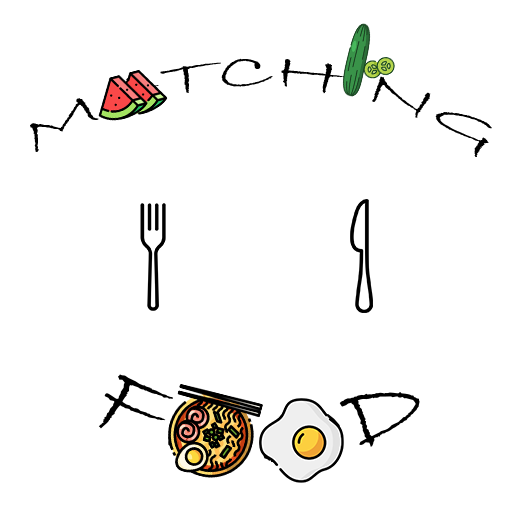
<style>
.page{position:relative;width:512px;height:512px;background:#ffffff}
.page>*{position:absolute;margin:0}
.t1{font:50px "BradleyHandITC";color:#000000}
.t2{font:100px "BradleyHandITC";color:#000000}
</style>
<div class="page">
<p class="t1" style="left:30px;top:58px;width:462px;height:99px;text-align:center">MATCHING</p>
<p class="t2" style="left:98px;top:374px;width:322px;height:90px">FOOD</p>
</div>
